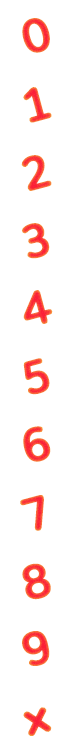
<style>
.page{position:relative;width:72px;height:748px;background:#ffffff}
.page>*{position:absolute;margin:0}
.t1{font:45px "Binggrae-Bold"}
</style>
<div class="page">
<p class="t1" style="left:22px;top:18px;width:28px;height:35px;rotate:-15deg">0</p>
<p class="t1" style="left:23px;top:87px;width:29px;height:36px;rotate:-15deg">1</p>
<p class="t1" style="left:21px;top:155px;width:31px;height:36px;rotate:-15deg">2</p>
<p class="t1" style="left:21px;top:223px;width:29px;height:36px;rotate:-15deg">3</p>
<p class="t1" style="left:23px;top:290px;width:30px;height:34px;rotate:-15deg">4</p>
<p class="t1" style="left:23px;top:358px;width:27px;height:37px;rotate:-15deg">5</p>
<p class="t1" style="left:23px;top:426px;width:28px;height:36px;rotate:-15deg">6</p>
<p class="t1" style="left:20px;top:495px;width:24px;height:36px;rotate:-15deg">7</p>
<p class="t1" style="left:22px;top:563px;width:29px;height:37px;rotate:-15deg">8</p>
<p class="t1" style="left:22px;top:631px;width:28px;height:35px;rotate:-15deg">9</p>
<p class="t1" style="left:23px;top:707px;width:29px;height:29px;rotate:-15deg">x</p>
</div>
